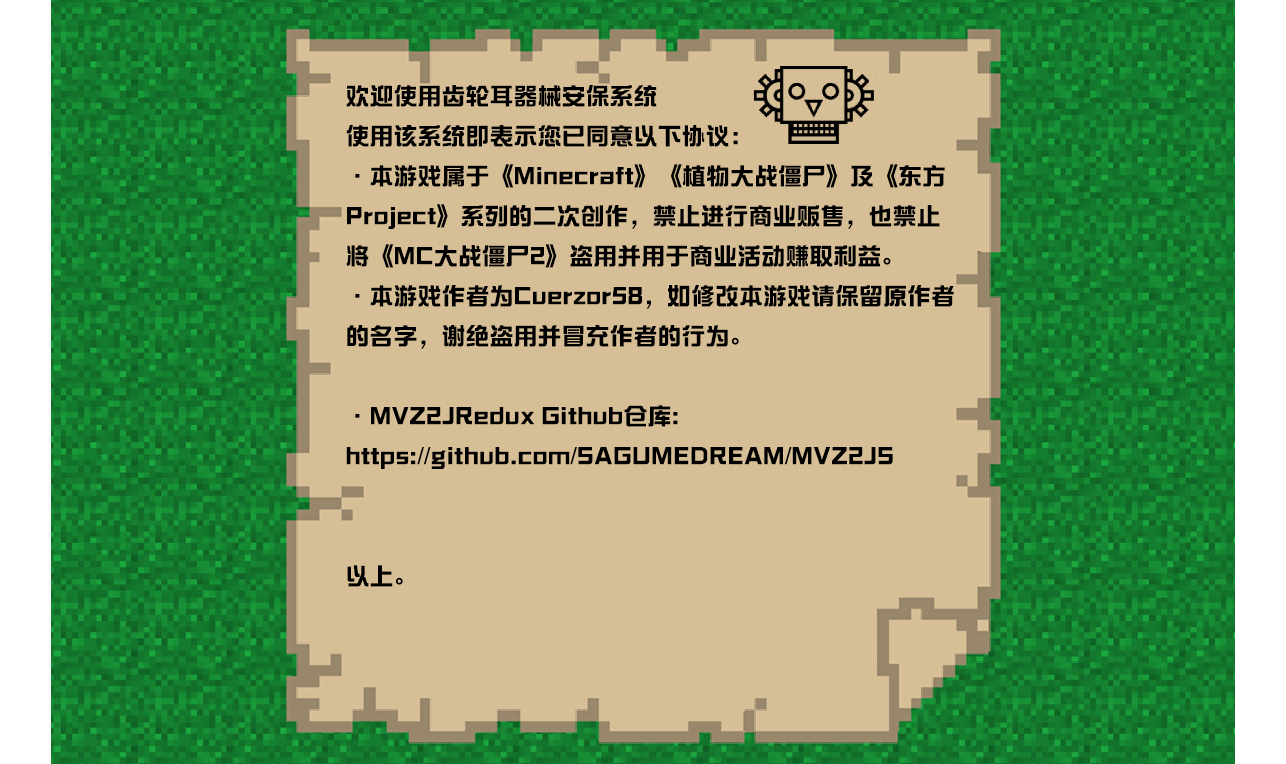
<style>
.page{position:relative;width:1286px;height:764px;background:#d6be96}
.page>*{position:absolute;margin:0}
.t1{font:24px/40px "toolboxZongYiGB-Bold";color:#000000}
</style>
<div class="page">
<p class="t1" style="left:346px;top:85px;width:608px;height:502px">欢迎使用齿轮耳器械安保系统<br>使用该系统即表示您已同意以下协议：<br>·本游戏属于《Minecraft》《植物大战僵尸》及《东方Project》系列的二次创作，禁止进行商业贩售，也禁止将《MC大战僵尸2》盗用并用于商业活动赚取利益。<br>·本游戏作者为Cuerzor58，如修改本游戏请保留原作者的名字，谢绝盗用并冒充作者的行为。<br><br>·MVZ2JRedux Github仓库:<br>https://github.com/SAGUMEDREAM/MVZ2JS<br><br><br>以上。</p>
</div>
